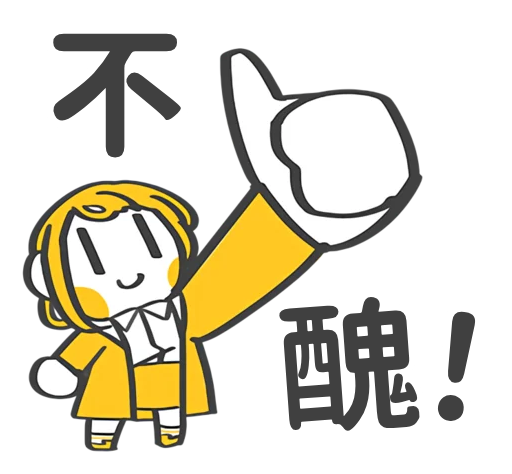
<style>
.page{position:relative;width:512px;height:474px;background:#ffffff}
.page>*{position:absolute;margin:0}
.t1{font:142px "ShangguRoundTC-Bold"}
.t2{font:143px "ShangguRoundTC-Bold"}
.t3{font:146px "ShangguRoundTC-Bold"}
</style>
<div class="page">
<p class="t1" style="left:42px;top:25px;width:149px;height:141px">不</p>
<p class="t2" style="left:272px;top:289px;width:154px;height:150px;rotate:-4deg">醜</p>
<p class="t3" style="left:430px;top:304px;width:53px;height:125px;rotate:8deg">！</p>
</div>
